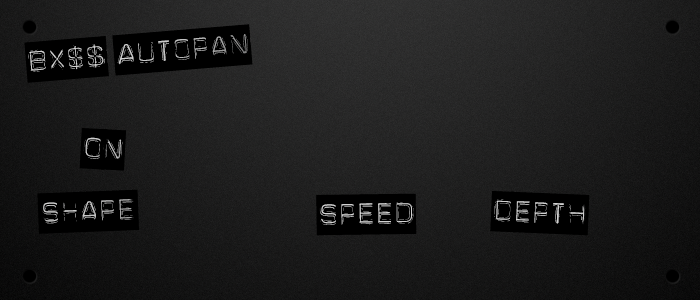
<style>
.page{position:relative;width:700px;height:300px}
.page>*{position:absolute;margin:0}
.t1{font:60px "Dymo";letter-spacing:-0.08em;color:#000000}
</style>
<div class="page">
<p class="t1" style="left:24px;top:24px;width:229px;height:59px;rotate:-5deg">BX$$  AUTOPAN</p>
<p class="t1" style="left:79px;top:128px;width:47px;height:43px;rotate:3deg">on</p>
<p class="t1" style="left:37px;top:189px;width:102px;height:45px;rotate:-2deg">Shape</p>
<p class="t1" style="left:316px;top:193px;width:101px;height:43px;rotate:-1deg">SPEED</p>
<p class="t1" style="left:490px;top:191px;width:100px;height:45px;rotate:2deg">DEPTH</p>
</div>
